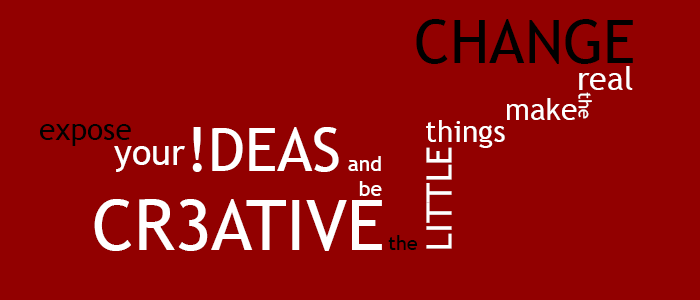
<style>
.page{position:relative;width:700px;height:300px;background:#920000}
.page>*{position:absolute;margin:0}
.t1{font:60px "TrebuchetMS";color:#000000}
.t2{font:32px "TrebuchetMS";color:#ffffff}
.t3{font:30px "TrebuchetMS";color:#ffffff}
.t4{font:17.9px "TrebuchetMS";color:#ffffff}
.t5{font:30px "TrebuchetMS";color:#000000}
.t6{font:60px "TrebuchetMS";color:#ffffff}
.t7{font:36px "TrebuchetMS";color:#ffffff}
.t8{font:35px "TrebuchetMS";color:#ffffff}
.t9{font:21px "TrebuchetMS";color:#ffffff}
.t10{font:70px "TrebuchetMS";color:#ffffff}
.t11{font:20px "TrebuchetMS";color:#000000}
</style>
<div class="page">
<p class="t1" style="left:416px;top:19px;width:217px;height:45px">CHANGE</p>
<p class="t2" style="left:579px;top:66px;width:54px;height:24px">real</p>
<p class="t3" style="left:507px;top:98px;width:70px;height:22px">make</p>
<p class="t4" style="left:578px;top:92px;width:14px;height:27px;rotate:90deg">the</p>
<p class="t5" style="left:40px;top:124px;width:91px;height:22px">expose</p>
<p class="t3" style="left:426px;top:120px;width:79px;height:28px">things</p>
<p class="t6" style="left:192px;top:127px;width:147px;height:45px">!DEAS</p>
<p class="t7" style="left:114px;top:146px;width:71px;height:26px">your</p>
<p class="t8" style="left:426px;top:147px;width:26px;height:102px;rotate:-90deg">LITTLE</p>
<p class="t9" style="left:348px;top:156px;width:34px;height:40px;text-align:right">and<br>be</p>
<p class="t10" style="left:94px;top:199px;width:288px;height:52px">CR3ATIVE</p>
<p class="t11" style="left:388px;top:235px;width:30px;height:15px">the</p>
</div>
